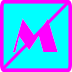
<style>
.page{position:relative;width:72px;height:72px;background:#00ffff}
.page>*{position:absolute;margin:0}
.t1{font:48px "Broadway";color:#ff00ff}
</style>
<div class="page">
<p class="t1" style="left:13px;top:18px;width:45px;height:35px">M</p>
</div>
